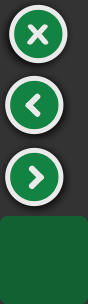
<style>
.page{position:relative;width:88px;height:304px;background:#126132}
.page>*{position:absolute;margin:0}
.t1{font:37.1px "ArialRoundedMTBold";color:#eaeaea;scale:1.21 1}
</style>
<div class="page">
<p class="t1" style="left:27px;top:24px;width:22px;height:21px">x</p>
</div>
